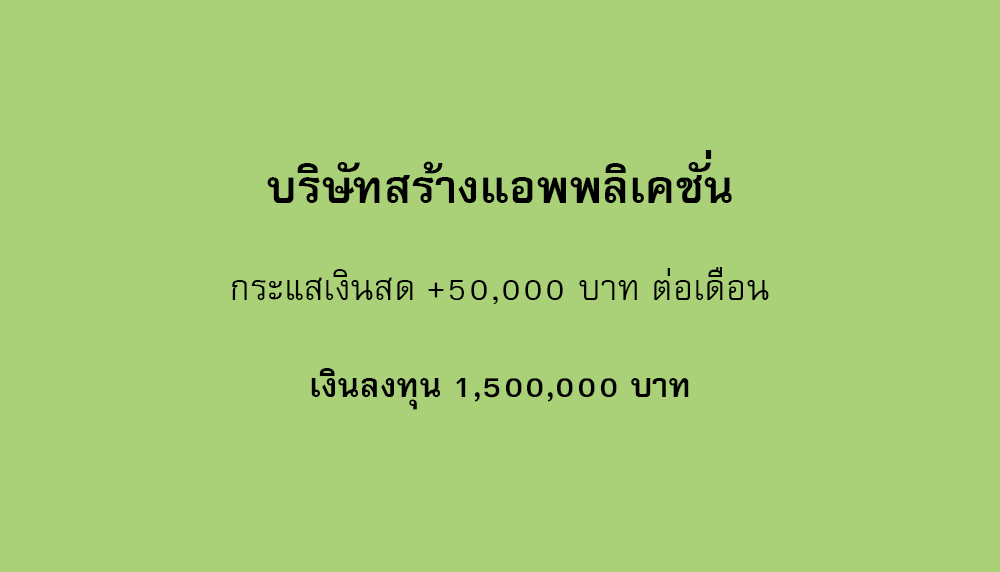
<style>
.page{position:relative;width:1000px;height:572px;background:#aad178}
.page>*{position:absolute;margin:0}
.t1{font:64px "FreesiaUPCBold";color:#000000}
.t2{font:50px "FreesiaUPC";color:#000000}
.t3{font:47px "FreesiaUPCBold";color:#000000}
</style>
<div class="page">
<p class="t1" style="left:267px;top:150px;width:465px;height:53px">บริษัทสร้างแอพพลิเคชั่น</p>
<p class="t2" style="left:232px;top:267px;width:537px;height:38px">กระแสเงินสด +50,000 บาท ต่อเดือน</p>
<p class="t3" style="left:311px;top:368px;width:378px;height:42px">เงินลงทุน 1,500,000 บาท</p>
</div>
